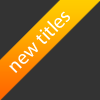
<style>
.page{position:relative;width:100px;height:100px;background:#333333}
.page>*{position:absolute;margin:0}
.t1{font:20px "MyriadPro-Regular";color:#ffffff}
</style>
<div class="page">
<p class="t1" style="left:9px;top:11px;width:61px;height:62px;rotate:-45deg">new titles</p>
</div>
